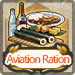
<style>
.page{position:relative;width:75px;height:75px}
.page>*{position:absolute;margin:0}
.t1{font:12px "AdobeClean-Regular";letter-spacing:-0.08em;color:#ff5a00}
</style>
<div class="page">
<p class="t1" style="left:6px;top:54px;width:64px;height:10px">Aviation Ration</p>
</div>
